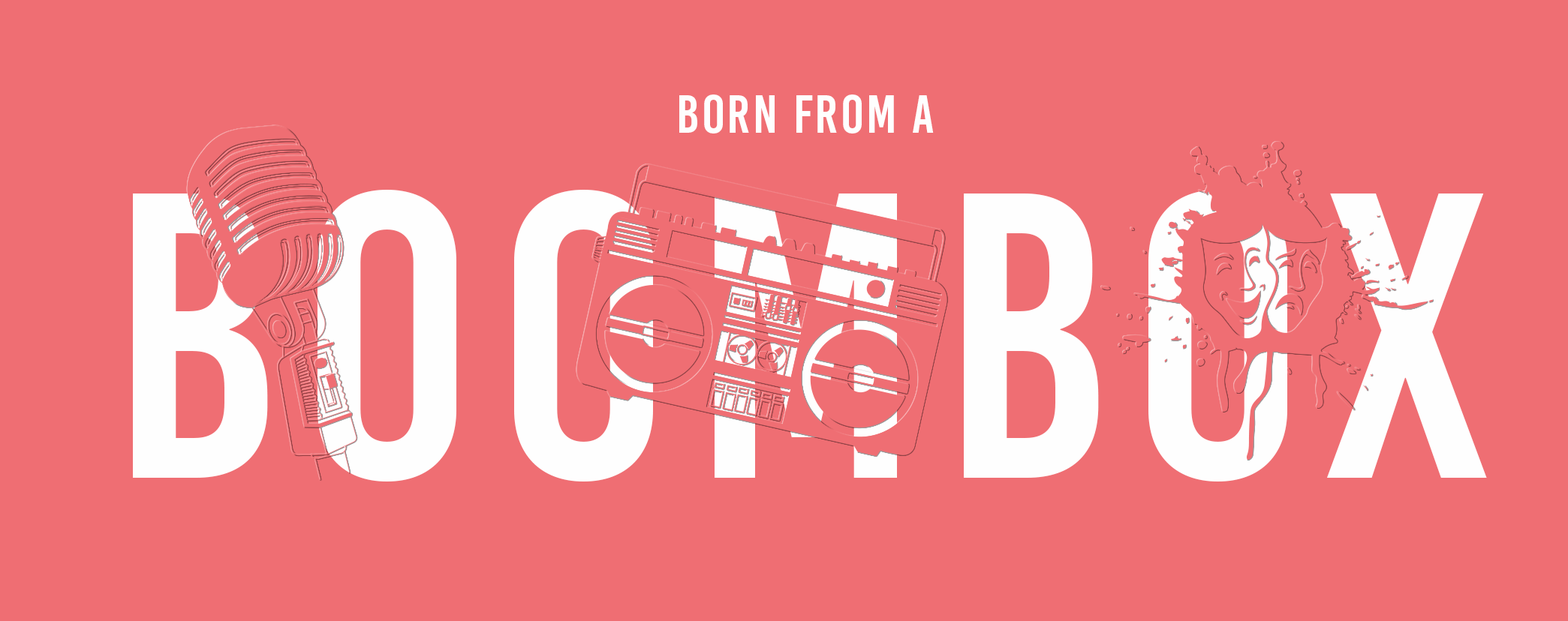
<style>
.page{position:relative;width:1568px;height:621px;background:#ef6e73}
.page>*{position:absolute;margin:0}
.t1{font:54px "BebasKai";letter-spacing:0.05em;color:#fefefe}
.t2{font:406.1px "BebasKai";letter-spacing:0.05em;color:#fefefe;text-transform:uppercase}
</style>
<div class="page">
<p class="t1" style="left:679px;top:95px;width:255px;height:39px">born from a</p>
<p class="t2" style="left:133px;top:190px;width:1354px;height:292px">boombox</p>
</div>
